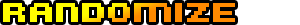
<style>
.page{position:relative;width:300px;height:25px;background:#000000}
.page>*{position:absolute;margin:0}
.t1{font:29.8px "Kroeger0563";letter-spacing:0.005em;text-transform:uppercase}
</style>
<div class="page">
<p class="t1" style="left:3px;top:3px;width:232px;height:19px">RANDOMIZE</p>
</div>
